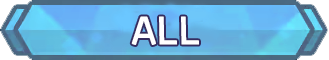
<style>
.page{position:relative;width:329px;height:60px}
.page>*{position:absolute;margin:0}
.t1{font:37px "CookieRunOTF-Regular";color:#ffffff}
</style>
<div class="page">
<p class="t1" style="left:131px;top:16px;width:68px;height:29px">ALL</p>
</div>
